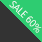
<style>
.page{position:relative;width:42px;height:42px;background:#333333}
.page>*{position:absolute;margin:0}
.t1{font:10px "MicrosoftNewTaiLue";color:#ffffff;scale:0.94 1}
</style>
<div class="page">
<p class="t1" style="left:9px;top:1px;width:33px;height:32px;rotate:45deg">SALE 60%</p>
</div>
